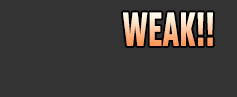
<style>
.page{position:relative;width:237px;height:97px;background:#333333}
.page>*{position:absolute;margin:0}
.t1{font:51.9px "Teko-Semibold";font-weight:bold;scale:0.64 1}
</style>
<div class="page">
<p class="t1" style="left:123px;top:12px;width:90px;height:34px">WEAK!!</p>
</div>
